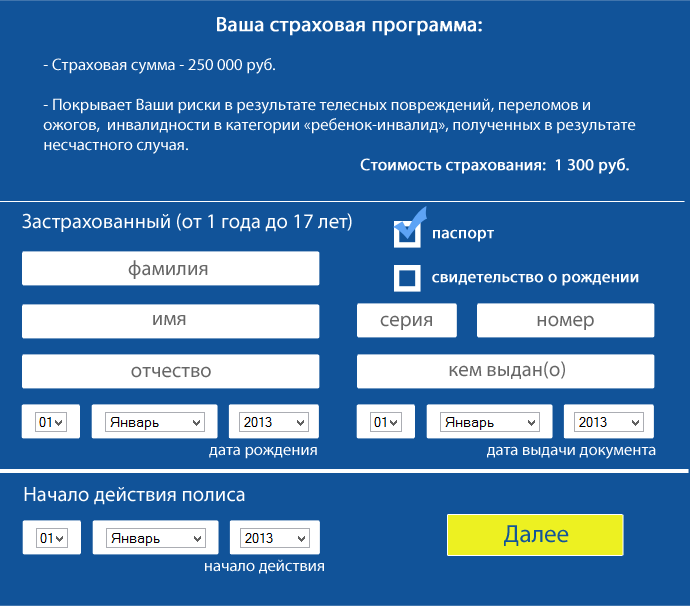
<style>
.page{position:relative;width:690px;height:606px;background:#115399}
.page>*{position:absolute;margin:0}
.t1{font:20.8px "MyriadPro-Regular";color:#ffffff;font-weight:bold}
.t2{font:16.7px "MyriadPro-Regular";color:#ffffff}
.t3{font:16.7px "MyriadPro-Regular";color:#ffffff;font-weight:bold}
.t4{font:20.8px "MyriadPro-Regular";color:#ffffff}
.t5{font:20.8px "MyriadPro-Regular";color:#666666}
.t6{font:25px "MyriadPro-Regular";color:#135599}
</style>
<div class="page">
<p class="t1" style="left:217px;top:17px;width:265px;height:19px">Ваша страховая программа:</p>
<p class="t2" style="left:43px;top:58px;width:593px;height:96px;text-align:center"><span class="t3"><br></span>- Страховая сумма - 250 000 руб.<br><br>- Покрывает Ваши риски в результате телесных повреждений, переломов и ожогов,  инвалидности в категории «ребенок-инвалид», полученных в результате несчастного случая.</p>
<p class="t3" style="left:360px;top:158px;width:269px;height:16px">Стоимость страхования:  1 300 руб.</p>
<p class="t4" style="left:22px;top:213px;width:330px;height:19px">Застрахованный (от 1 года до 17 лет)</p>
<p class="t3" style="left:433px;top:229px;width:61px;height:13px">паспорт</p>
<p class="t5" style="left:128px;top:260px;width:80px;height:19px">фамилия</p>
<p class="t3" style="left:432px;top:273px;width:207px;height:13px">свидетельство о рождении</p>
<p class="t5" style="left:153px;top:315px;width:33px;height:10px">имя</p>
<p class="t5" style="left:380px;top:315px;width:52px;height:15px">серия</p>
<p class="t5" style="left:537px;top:315px;width:57px;height:15px">номер</p>
<p class="t5" style="left:131px;top:366px;width:80px;height:12px">отчество</p>
<p class="t5" style="left:449px;top:361px;width:116px;height:18px">кем выдан(о)</p>
<p class="t2" style="left:209px;top:446px;width:108px;height:13px">дата рождения</p>
<p class="t2" style="left:487px;top:446px;width:169px;height:13px">дата выдачи документа</p>
<p class="t4" style="left:24px;top:487px;width:221px;height:18px">Начало действия полиса</p>
<p class="t6" style="left:504px;top:525px;width:65px;height:21px">Далее</p>
<p class="t2" style="left:205px;top:559px;width:119px;height:15px">начало действия</p>
</div>
